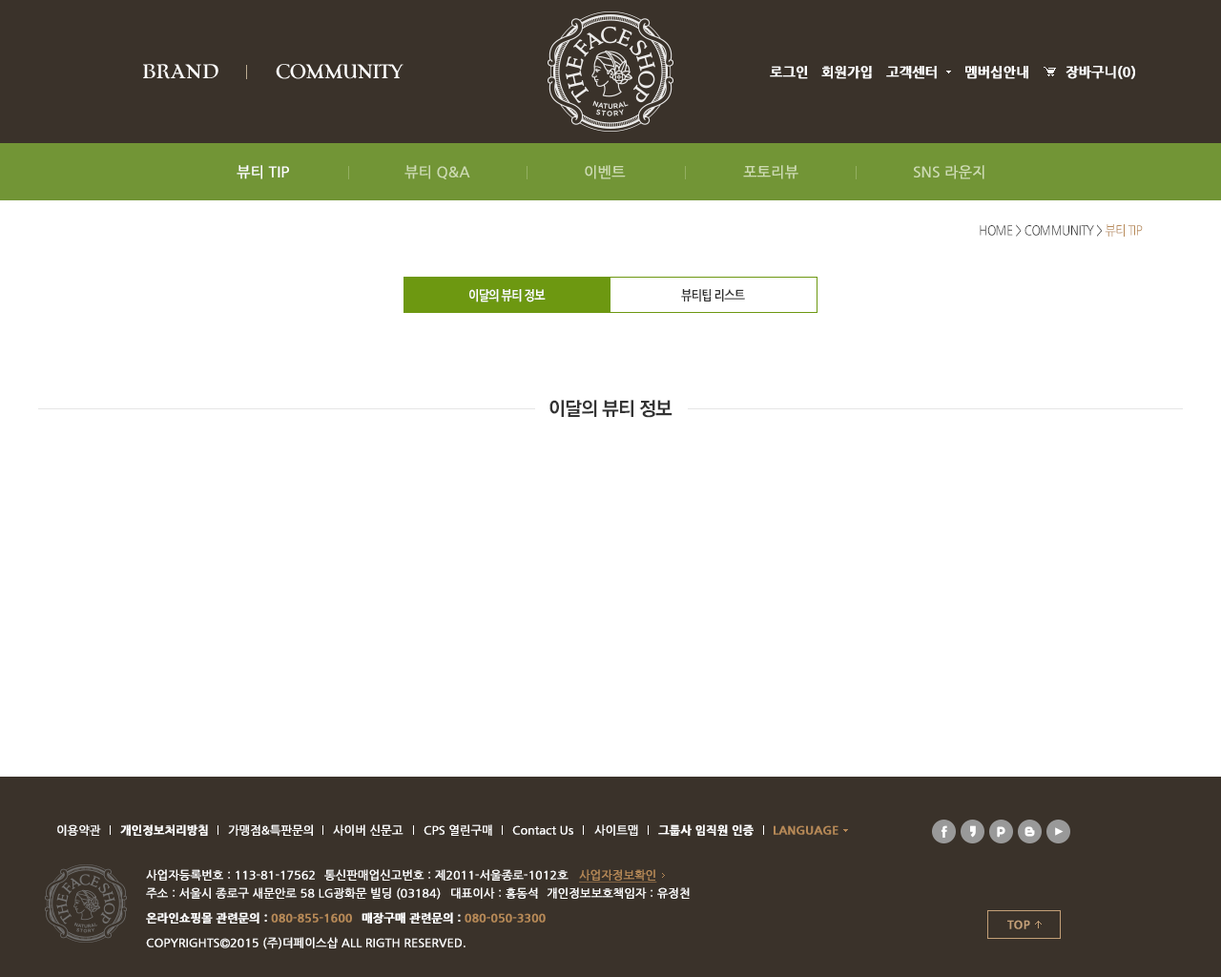
<style>
.page{position:relative;width:1221px;height:977px;background:#ffffff}
.page>*{position:absolute;margin:0}
.t1{font:13.4px "NanumGothicBold";color:#ffffff;font-weight:bold}
.t2{font:14.3px "NanumGothic";color:#ffffff;font-weight:bold}
.t3{font:14.3px "NanumGothic";color:#cddbb1;font-weight:bold}
.t4{font:13.4px "NanumGothic";letter-spacing:-0.03em;color:#333333;scale:0.85 1}
.t5{font:13.4px "NanumGothic";letter-spacing:-0.03em;color:#b68957;scale:0.85 1}
.t6{font:13.4px "NanumGothicBold";letter-spacing:-0.03em;color:#ffffff;scale:0.85 1}
.t7{font:13.4px "NanumGothicBold";letter-spacing:-0.03em;color:#333333;scale:0.85 1}
.t8{font:11.4px "NanumGothic";color:#ffffff;font-weight:bold}
.t9{font:11.4px "NanumGothicBold";color:#ffffff;font-weight:bold}
.t10{font:11.4px "NanumGothicBold";color:#b68957;font-weight:bold}
.t11{font:11.4px "NanumGothic";color:#b68957;font-weight:bold;text-decoration:underline}
</style>
<div class="page">
<p class="t1" style="left:770px;top:66px;width:38px;height:13px">로그인</p>
<p class="t1" style="left:821px;top:66px;width:51px;height:13px">회원가입</p>
<p class="t1" style="left:886px;top:66px;width:51px;height:13px">고객센터</p>
<p class="t1" style="left:965px;top:66px;width:63px;height:13px">멤버십안내</p>
<p class="t1" style="left:1065px;top:66px;width:70px;height:13px">장바구니(0)</p>
<p class="t2" style="left:237px;top:165px;width:52px;height:14px">뷰티 TIP</p>
<p class="t3" style="left:404px;top:165px;width:66px;height:14px">뷰티 Q&amp;A</p>
<p class="t3" style="left:585px;top:165px;width:41px;height:14px">이벤트</p>
<p class="t3" style="left:743px;top:165px;width:55px;height:14px">포토리뷰</p>
<p class="t3" style="left:914px;top:165px;width:70px;height:14px">SNS 라운지</p>
<p class="t4" style="left:980px;top:224px;width:163px;height:13px">HOME &gt; COMMUNITY &gt; <span class="t5">뷰티 TIP</span></p>
<p class="t6" style="left:469px;top:289px;width:77px;height:13px">이달의 뷰티 정보</p>
<p class="t7" style="left:681px;top:289px;width:64px;height:13px">뷰티팁 리스트</p>
<p class="t8" style="left:57px;top:824px;width:44px;height:12px">이용약관</p>
<p class="t9" style="left:120px;top:824px;width:88px;height:12px">개인정보처리방침</p>
<p class="t8" style="left:228px;top:824px;width:85px;height:12px">가맹점&amp;특판문의</p>
<p class="t8" style="left:333px;top:824px;width:70px;height:12px">사이버 신문고</p>
<p class="t8" style="left:423px;top:824px;width:69px;height:12px">CPS 열린구매</p>
<p class="t8" style="left:512px;top:825px;width:61px;height:10px">Contact Us</p>
<p class="t8" style="left:594px;top:824px;width:44px;height:12px">사이트맵</p>
<p class="t9" style="left:658px;top:824px;width:96px;height:12px">그룹사 임직원 인증</p>
<p class="t10" style="left:774px;top:825px;width:64px;height:10px">LANGUAGE</p>
<p class="t8" style="left:146px;top:869px;width:169px;height:11px">사업자등록번호 : 113-81-17562</p>
<p class="t8" style="left:324px;top:869px;width:244px;height:11px">통신판매업신고번호 : 제2011-서울종로-1012호</p>
<p class="t11" style="left:579px;top:869px;width:78px;height:13px">사업자정보확인</p>
<p class="t8" style="left:146px;top:887px;width:295px;height:12px">주소 : 서울시 종로구 새문안로 58 LG광화문 빌딩 (03184)</p>
<p class="t8" style="left:451px;top:887px;width:87px;height:11px">대표이사 : 홍동석</p>
<p class="t8" style="left:547px;top:887px;width:143px;height:11px">개인정보보호책임자 : 유정천</p>
<p class="t9" style="left:146px;top:912px;width:206px;height:11px">온라인쇼핑몰 관련문의 : <span class="t10">080-855-1600</span></p>
<p class="t10" style="left:361px;top:912px;width:185px;height:11px"><span class="t9">매장구매 관련문의 : </span>080-050-3300</p>
<p class="t8" style="left:146px;top:937px;width:319px;height:12px">COPYRIGHTS©2015 (주)더페이스샵 ALL RIGTH RESERVED.</p>
</div>
